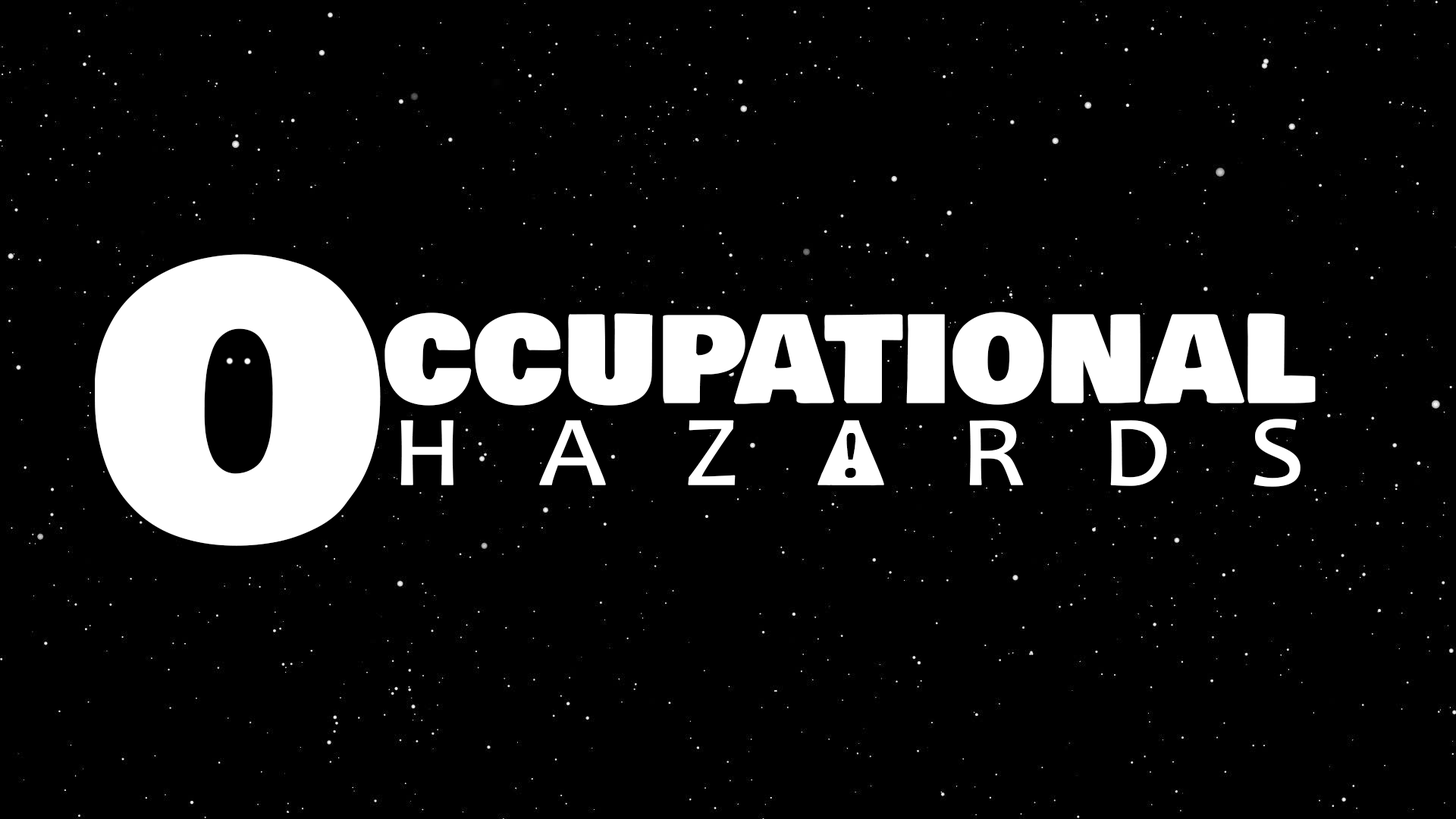
<style>
.page{position:relative;width:1456px;height:819px;background:#000000}
.page>*{position:absolute;margin:0}
.t1{font:168.3px "BowlbyOneSC-Regular";letter-spacing:-0.02em;color:#ffffff;font-variant:small-caps;font-weight:bold}
.t2{font:368.5px "BowlbyOneSC-Regular";letter-spacing:-0.04em;color:#ffffff;font-variant:small-caps;font-weight:bold}
.t3{font:121.9px "Candara";letter-spacing:0.62em;color:#ffffff;font-variant:small-caps;font-weight:bold}
.t4{font:68px "Candara";letter-spacing:0.62em;color:#000000;font-variant:small-caps;font-weight:bold}
</style>
<div class="page">
<p class="t1" style="left:95px;top:254px;width:1221px;height:292px"><span class="t2">O</span>ccupational</p>
<p class="t3" style="left:400px;top:419px;width:901px;height:68px">hazards</p>
<p class="t4" style="left:845px;top:433px;width:11px;height:45px">!</p>
</div>
